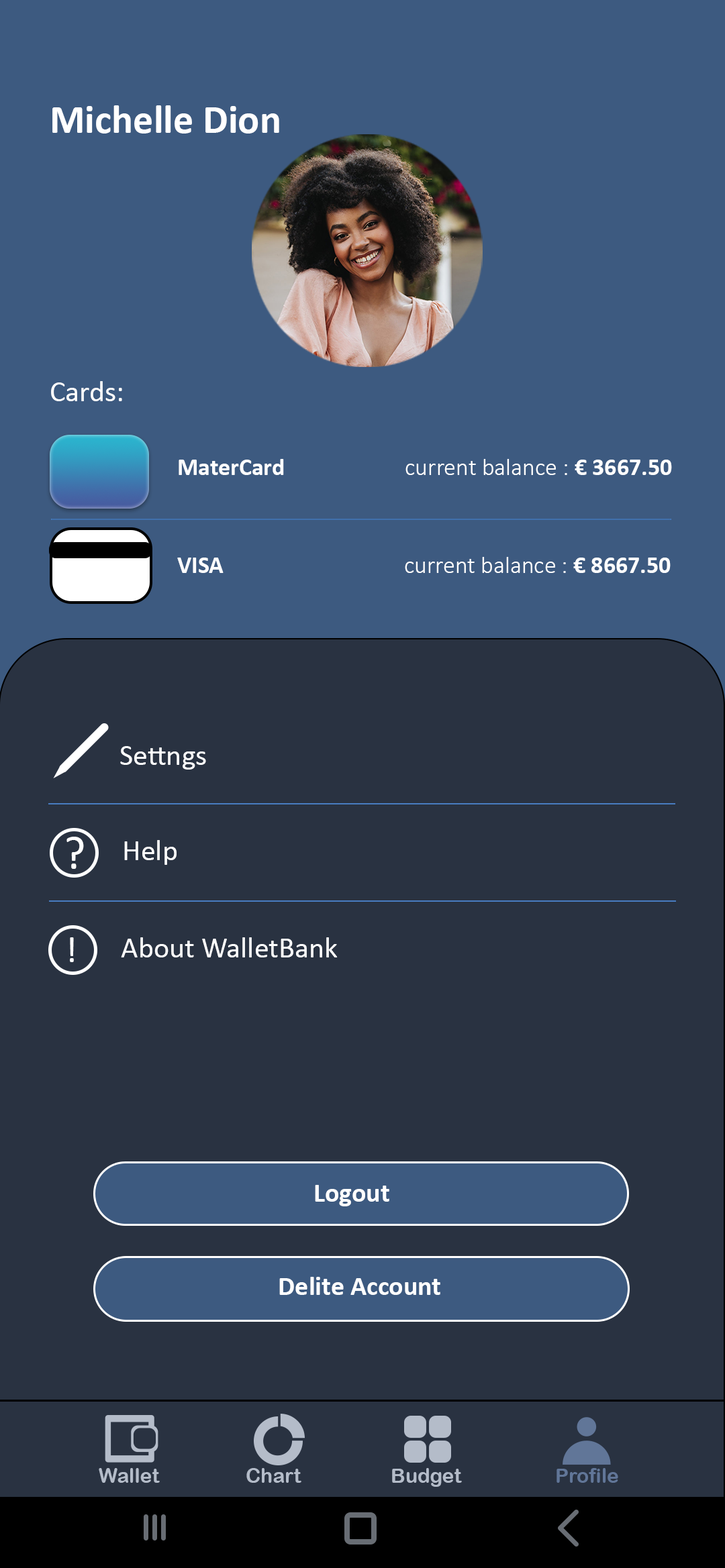
<style>
.page{position:relative;width:725px;height:1568px;background:#293241}
.page>*{position:absolute;margin:0}
.t1{font:40.3px "Calibri-Bold";color:#ffffff}
.t2{font:29.5px "Calibri";color:#ffffff}
.t3{font:24.2px "Calibri-Light";color:#ffffff}
.t4{font:24.2px "Calibri-Bold";color:#ffffff}
.t5{font:46.8px "Calibri";color:#ffffff}
.t6{font:36.9px "Calibri";color:#ffffff}
.t7{font:26.8px "Calibri-Bold";color:#ffffff}
.t8{font:20.1px "ArialRoundedMTBold";color:#b4bcc9}
.t9{font:20.1px "ArialRoundedMTBold";color:#617698}
</style>
<div class="page">
<p class="t1" style="left:52px;top:105px;width:227px;height:29px">Michelle Dion</p>
<p class="t2" style="left:51px;top:381px;width:71px;height:20px">Cards:</p>
<p class="t3" style="left:178px;top:459px;width:494px;height:16px"><span class="t4">MaterCard                      </span>current balance : <span class="t4">€ 3667.50</span></p>
<p class="t3" style="left:177px;top:557px;width:493px;height:16px"><span class="t4">VISA                                 </span>current balance : <span class="t4">€ 8667.50</span></p>
<p class="t2" style="left:120px;top:746px;width:86px;height:24px">Settngs</p>
<p class="t5" style="left:66px;top:837px;width:18px;height:32px">?</p>
<p class="t2" style="left:124px;top:840px;width:52px;height:25px">Help</p>
<p class="t6" style="left:70px;top:937px;width:4px;height:25px">!</p>
<p class="t2" style="left:121px;top:937px;width:216px;height:20px">About WalletBank</p>
<p class="t7" style="left:315px;top:1185px;width:74px;height:21px">Logout</p>
<p class="t7" style="left:279px;top:1277px;width:161px;height:18px">Delite Account</p>
<p class="t8" style="left:99px;top:1468px;width:61px;height:15px">Wallet</p>
<p class="t8" style="left:246px;top:1468px;width:55px;height:15px">Chart</p>
<p class="t8" style="left:392px;top:1468px;width:70px;height:19px">Budget</p>
<p class="t9" style="left:556px;top:1468px;width:62px;height:15px">Profile</p>
</div>
